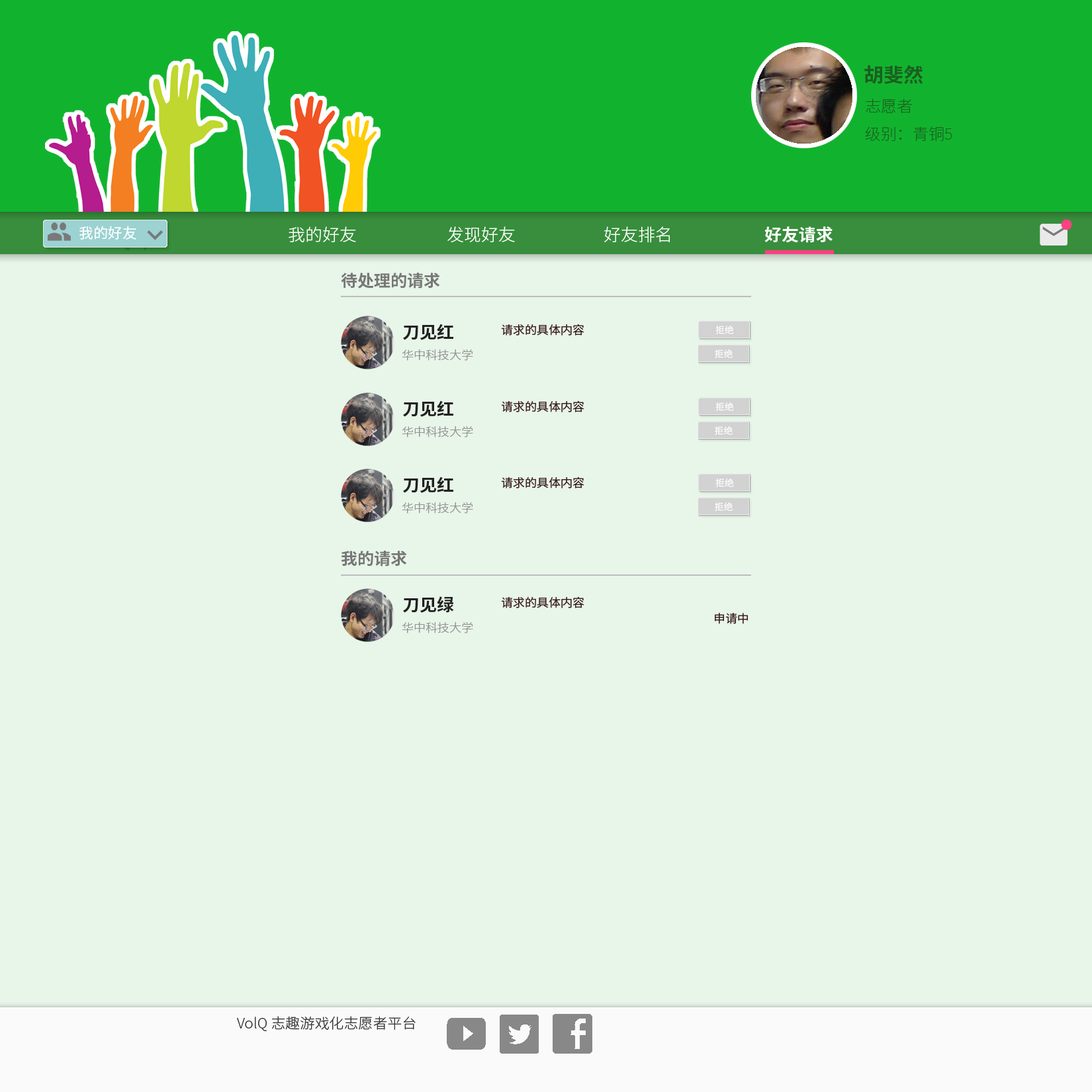
<style>
.page{position:relative;width:1092px;height:1092px;background:#e8f5e9}
.page>*{position:absolute;margin:0}
.t1{font:19.5px "NotoSansCJKsc-Bold";color:#1b5e20}
.t2{font:15.6px "NotoSansCJKsc-Thin";color:#1b5e20}
.t3{font:14.3px "NotoSansCJKsc-Regular";color:#ffffff}
.t4{font:16.9px "NotoSansCJKsc-Light";color:#ffffff}
.t5{font:16.9px "NotoSansCJKsc-Bold";color:#ffffff}
.t6{font:16.2px "NotoSansCJKsc-Bold";color:#777777}
.t7{font:16.9px "NotoSansCJKsc-Bold";color:#222121}
.t8{font:11.7px "NotoSansCJKsc-Regular";color:#391e1e}
.t9{font:11.7px "NotoSansCJKsc-Light";color:#949494}
.t10{font:14.3px "NotoSansCJKsc-Light";color:#353535}
</style>
<div class="page">
<p class="t1" style="left:864px;top:65px;width:59px;height:19px">胡斐然</p>
<p class="t2" style="left:865px;top:99px;width:87px;height:42px">志愿者<br>级别：青铜5</p>
<p class="t3" style="left:79px;top:226px;width:57px;height:14px">我的好友</p>
<p class="t4" style="left:289px;top:226px;width:67px;height:16px">我的好友</p>
<p class="t4" style="left:447px;top:226px;width:68px;height:17px">发现好友</p>
<p class="t4" style="left:604px;top:226px;width:66px;height:17px">好友排名</p>
<p class="t5" style="left:764px;top:226px;width:69px;height:17px">好友请求</p>
<p class="t6" style="left:341px;top:273px;width:99px;height:16px">待处理的请求</p>
<p class="t6" style="left:341px;top:551px;width:66px;height:16px">我的请求</p>
<p class="t7" style="left:403px;top:596px;width:51px;height:17px">刀见绿</p>
<p class="t8" style="left:501px;top:596px;width:83px;height:12px">请求的具体内容</p>
<p class="t8" style="left:715px;top:613px;width:33px;height:11px">申请中</p>
<p class="t9" style="left:402px;top:622px;width:71px;height:11px">华中科技大学</p>
<p class="t10" style="left:237px;top:1016px;width:179px;height:15px">VolQ 志趣游戏化志愿者平台</p>
</div>
